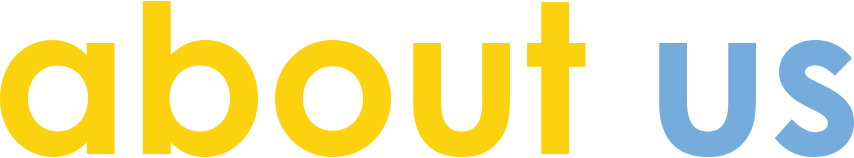
<style>
.page{position:relative;width:854px;height:158px;background:#ffffff}
.page>*{position:absolute;margin:0}
.t1{font:208.3px "CenturyGothicPro-Bold";color:#fcd20f}
.t2{font:208.3px "CenturyGothicPro-Bold";color:#76acdc}
</style>
<div class="page">
<p class="t1" style="left:0px;top:0px;width:854px;height:158px">about <span class="t2">us</span></p>
</div>
